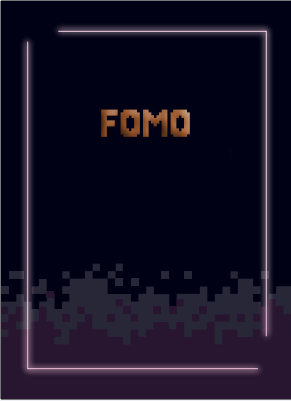
<style>
.page{position:relative;width:291px;height:401px;background:#000115}
.page>*{position:absolute;margin:0}
.t1{font:50px "Jersey10-Regular";letter-spacing:0.025em}
</style>
<div class="page">
<p class="t1" style="left:101px;top:109px;width:89px;height:28px">FOMO</p>
</div>
